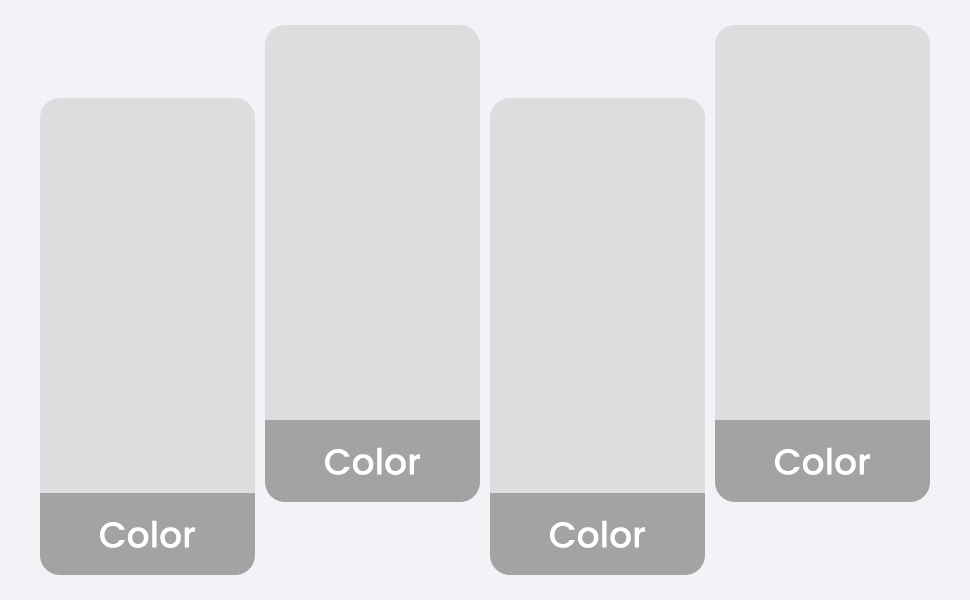
<style>
.page{position:relative;width:970px;height:600px;background:#dcdddf}
.page>*{position:absolute;margin:0}
.t1{font:36px "Poppins-Medium";color:#ffffff}
</style>
<div class="page">
<p class="t1" style="left:325px;top:447px;width:95px;height:28px">Color</p>
<p class="t1" style="left:775px;top:447px;width:95px;height:28px">Color</p>
<p class="t1" style="left:100px;top:520px;width:95px;height:28px">Color</p>
<p class="t1" style="left:550px;top:520px;width:95px;height:28px">Color</p>
</div>
